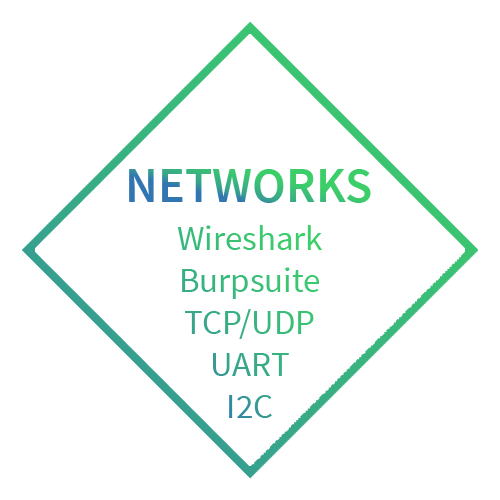
<style>
.page{position:relative;width:500px;height:500px;background:#ffffff}
.page>*{position:absolute;margin:0}
.t1{font:50px "SourceSansPro-SemiBold"}
.t2{font:35px "SourceSansPro-Regular";color:#39b87c}
</style>
<div class="page">
<p class="t1" style="left:129px;top:169px;width:242px;height:34px">NETWORKS</p>
<p class="t2" style="left:177px;top:225px;width:145px;height:193px;text-align:center">Wireshark<br>Burpsuite<br>TCP/UDP<br>UART<br>I2C</p>
</div>
